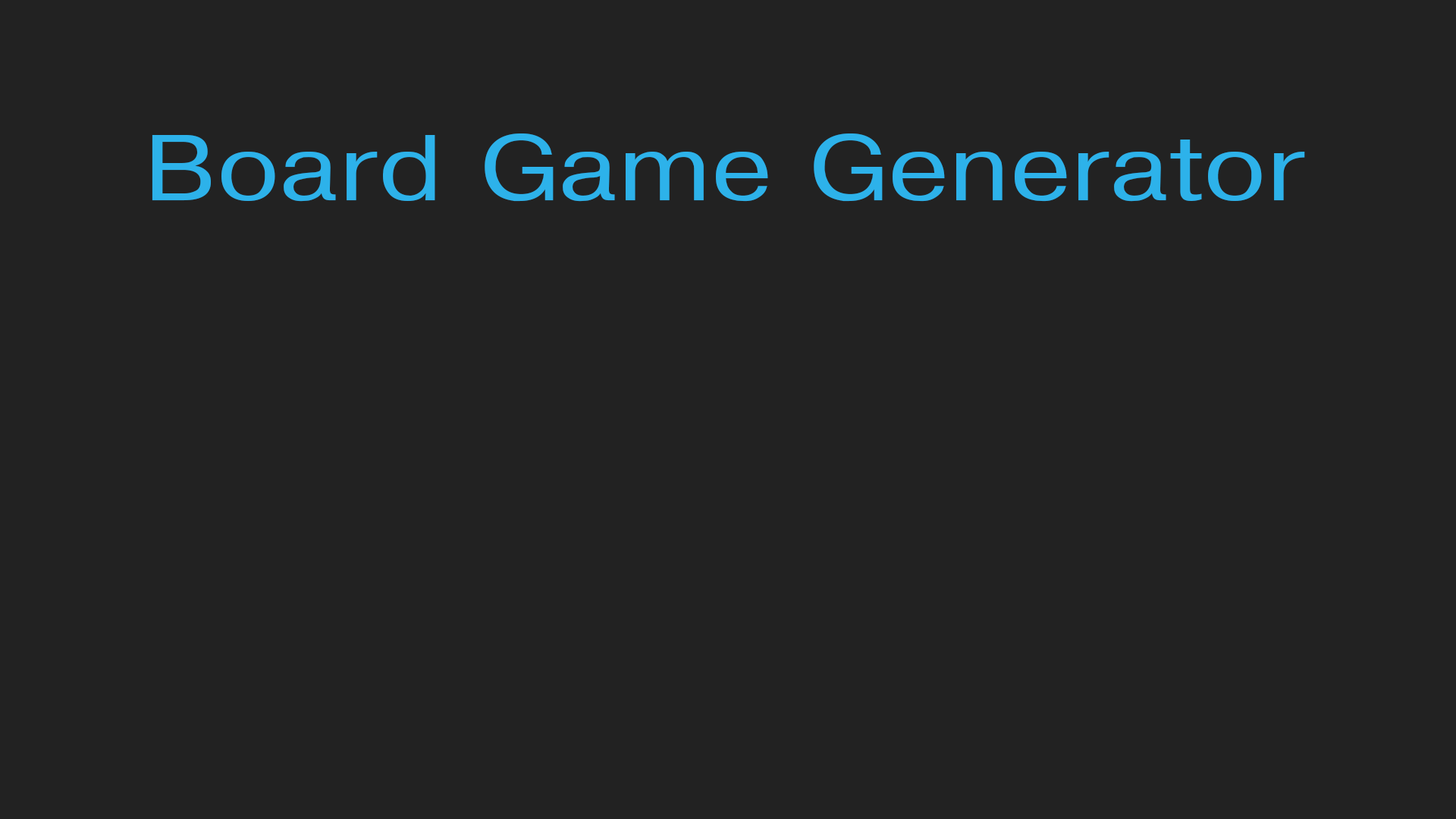
<style>
.page{position:relative;width:1456px;height:819px;background:#222222}
.page>*{position:absolute;margin:0}
.t1{font:91px "Helvetica";color:#2db2ea;scale:1.2 1}
</style>
<div class="page">
<p class="t1" style="left:152px;top:133px;width:1153px;height:69px">Board Game Generator</p>
</div>
